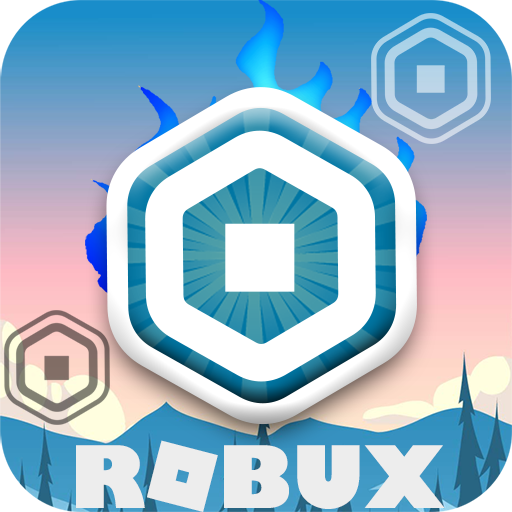
<style>
.page{position:relative;width:512px;height:512px}
.page>*{position:absolute;margin:0}
.t1{font:84.2px "Roblox2017";color:#ededed}
</style>
<div class="page">
<p class="t1" style="left:76px;top:440px;width:369px;height:72px">ROBUX</p>
</div>
